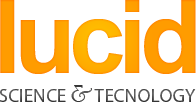
<style>
.page{position:relative;width:196px;height:102px;background:#ffffff}
.page>*{position:absolute;margin:0}
.t1{font:101px "Arial-BoldMT";letter-spacing:-0.05em;color:#ff9c00}
.t2{font:18.8px "MyriadPro-Regular";letter-spacing:0.02em;color:#3c3b3b}
.t3{font:24.2px "PoorRichard-Regular";letter-spacing:0.02em;color:#3c3b3b}
</style>
<div class="page">
<p class="t1" style="left:0px;top:0px;width:196px;height:74px">lucid</p>
<p class="t2" style="left:0px;top:85px;width:196px;height:17px">SCIENCE <span class="t3">&amp; </span>TECNOLOGY</p>
</div>
